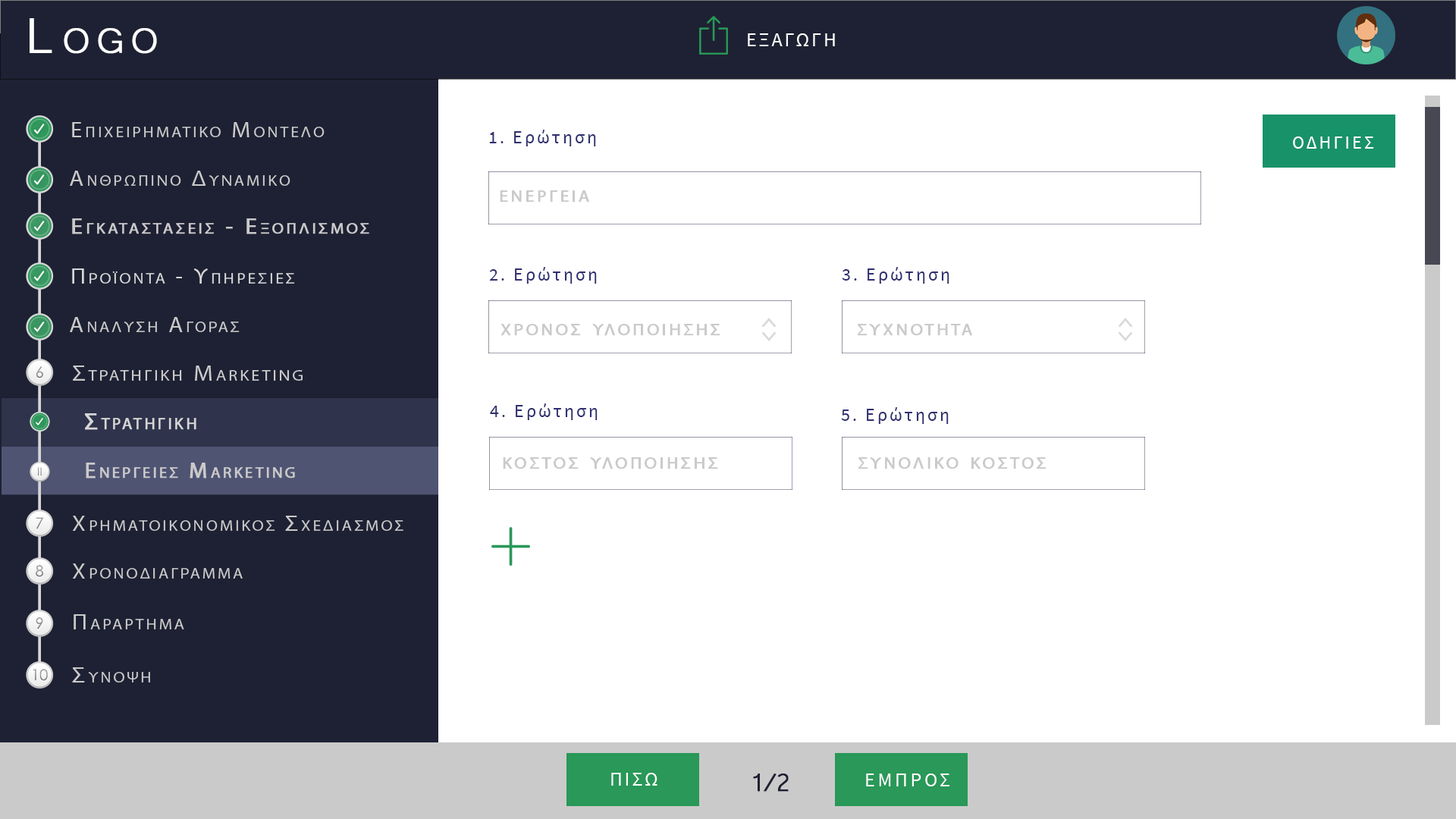
<style>
.page{position:relative;width:1456px;height:819px;background:#ffffff}
.page>*{position:absolute;margin:0}
.t1{font:63.7px "Microsoft-Yi-Baiti";letter-spacing:0.13em;color:#ffffff;font-variant:small-caps;font-weight:bold}
.t2{font:20px "SourceSansPro-Regular";letter-spacing:0.1em;color:#fefefe;text-transform:uppercase}
.t3{font:18.2px "SourceSansPro-Regular";letter-spacing:0.13em;color:#2f2f70}
.t4{font:18.2px "SourceSansPro-Regular";letter-spacing:0.13em;color:#2f2f70;text-transform:uppercase}
.t5{font:18.2px "SourceSansPro-Regular";letter-spacing:0.13em;color:#ffffff;text-transform:uppercase}
.t6{font:23.7px "MyriadPro-Regular";letter-spacing:0.13em;color:#cbcaca;font-variant:small-caps;font-weight:bold;scale:1.08 1}
.t7{font:32.8px "Microsoft-Yi-Baiti";letter-spacing:-0.1em;color:#1e2133;font-weight:bold}
.t8{font:20px "SourceSansPro-Regular";letter-spacing:0.13em;color:#fefefe;text-transform:uppercase}
</style>
<div class="page">
<p class="t1" style="left:30px;top:18px;width:127px;height:36px">Logo</p>
<p class="t2" style="left:748px;top:33px;width:87px;height:13px">εξαγωγη</p>
<p class="t3" style="left:489px;top:130px;width:107px;height:16px"><span class="t4">1. </span>Ερώτηση</p>
<p class="t5" style="left:1293px;top:136px;width:81px;height:13px">Οδηγιεσ</p>
<p class="t6" style="left:500px;top:190px;width:89px;height:12px">ενεργεια</p>
<p class="t3" style="left:489px;top:267px;width:108px;height:17px"><span class="t4">2. </span>Ερώτηση</p>
<p class="t3" style="left:842px;top:267px;width:107px;height:17px"><span class="t4">3. </span>Ερώτηση</p>
<p class="t6" style="left:500px;top:324px;width:220px;height:12px">χρονοσ υλοποιησησ</p>
<p class="t6" style="left:857px;top:324px;width:115px;height:12px">συχνοτητα</p>
<p class="t3" style="left:490px;top:403px;width:108px;height:17px"><span class="t4">4. </span>Ερώτηση</p>
<p class="t3" style="left:841px;top:407px;width:108px;height:17px"><span class="t4">5. </span>Ερώτηση</p>
<p class="t6" style="left:503px;top:457px;width:215px;height:12px">κοστοσ υλοποιησησ</p>
<p class="t6" style="left:858px;top:457px;width:188px;height:12px">συνολικο κοστοσ</p>
<p class="t2" style="left:611px;top:773px;width:46px;height:13px">Πισω</p>
<p class="t7" style="left:753px;top:773px;width:36px;height:19px">1/2</p>
<p class="t8" style="left:866px;top:773px;width:83px;height:13px">εμπροσ</p>
</div>
